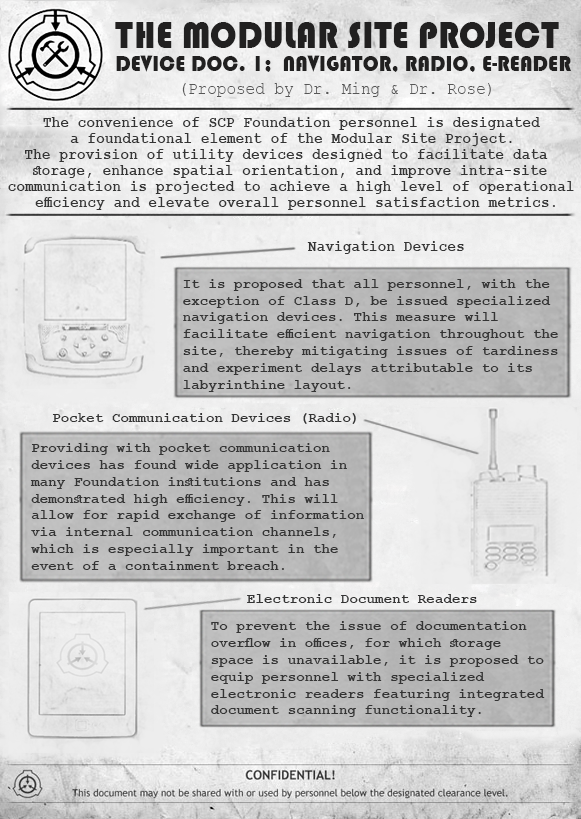
<style>
.page{position:relative;width:581px;height:819px}
.page>*{position:absolute;margin:0}
.t1{font:38.8px "Bauhaus93";letter-spacing:0.01em;color:#212020;scale:0.9 1}
.t2{font:23.2px "Bauhaus93";letter-spacing:0.01em;color:#212020;text-transform:uppercase;scale:0.9 1}
.t3{font:23.2px "Bauhaus93";letter-spacing:0.01em;color:#212020;scale:0.9 1}
.t4{font:17.5px "CourierNewPSMT";letter-spacing:0.01em;color:#575757;scale:0.9 1}
.t5{font:16.3px "CourierNewPS-BoldMT";letter-spacing:0.01em;color:#343434;scale:0.88 1}
.t6{font:14px "CourierNewPS-BoldMT";letter-spacing:0.01em;color:#343434}
</style>
<div class="page">
<p class="t1" style="left:115px;top:22px;width:444px;height:26px">THE MODULAR SITE PROJECT</p>
<p class="t2" style="left:116px;top:55px;width:455px;height:17px">Device <span class="t3">DOC. 1; </span> navigator, radio, E-reader</p>
<p class="t4" style="left:182px;top:82px;width:309px;height:15px">(Proposed by Dr. Ming &amp; Dr. Rose)</p>
<p class="t5" style="left:43px;top:117px;width:497px;height:13px">The convenience of SCP Foundation personnel is designated</p>
<p class="t5" style="left:70px;top:133px;width:442px;height:13px">a foundational element of the Modular Site Project.</p>
<p class="t5" style="left:24px;top:149px;width:524px;height:13px">The provision of utility devices designed to facilitate data</p>
<p class="t5" style="left:32px;top:165px;width:515px;height:13px">storage, enhance spatial orientation, and improve intra-site</p>
<p class="t5" style="left:8px;top:181px;width:566px;height:13px">communication is projected to achieve a high level of operational</p>
<p class="t5" style="left:35px;top:197px;width:520px;height:13px">efficiency and elevate overall personnel satisfaction metrics.</p>
<p class="t5" style="left:307px;top:241px;width:157px;height:13px">Navigation Devices</p>
<p class="t6" style="left:183px;top:279px;width:375px;height:113px">It is proposed that all personnel, with the exception of Class D, be issued specialized navigation devices. This measure will facilitate efficient navigation throughout the site, thereby mitigating issues of tardiness and experiment delays attributable to its labyrinthine layout.</p>
<p class="t6" style="left:52px;top:413px;width:304px;height:11px">Pocket Communication Devices (Radio)</p>
<p class="t6" style="left:30px;top:443px;width:334px;height:127px">Providing with pocket communication devices has found wide application in many Foundation institutions and has demonstrated high efficiency. This will allow for rapid exchange of information via internal communication channels, which is especially important in the event of a containment breach.</p>
<p class="t6" style="left:247px;top:594px;width:230px;height:9px">Electronic Document Readers</p>
<p class="t6" style="left:211px;top:621px;width:334px;height:96px">To prevent the issue of documentation overflow in offices, for which storage space is unavailable, it is proposed to equip personnel with specialized electronic readers featuring integrated document scanning functionality.</p>
</div>
